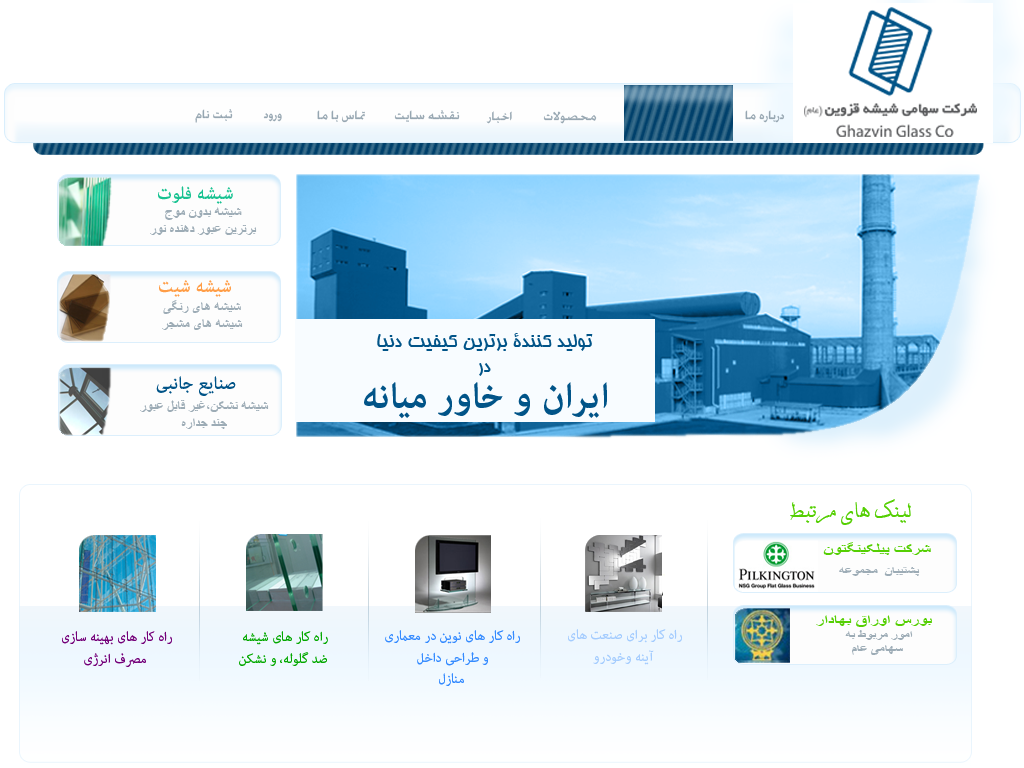
<style>
.page{position:relative;width:1024px;height:768px;background:#ffffff}
.page>*{position:absolute;margin:0}
.t1{font:16px "GillSans-UltraBold";color:#96a6b1}
.t2{font:24px "AdobeArabic-Bold";color:#18c291}
.t3{font:14px "TimesNewRomanPS-BoldMT";color:#9dacb6}
.t4{font:24px "AdobeArabic-Bold";color:#ff9d46}
.t5{font:21px "BHoma";color:#015488}
.t6{font:24px "AdobeArabic-Bold";color:#005387}
.t7{font:51px "AdobeArabic-Bold";color:#015488}
.t8{font:26px "BDavat";color:#55cf03}
.t9{font:14.5px "TimesNewRomanPS-BoldMT";color:#55cf03;scale:1.24 1}
.t10{font:11.3px "TimesNewRomanPS-BoldMT";color:#9dacb6;scale:1.24 1}
.t11{font:18px "AdobeArabic-Regular";color:#358bff}
.t12{font:18px "AdobeArabic-Regular";color:#a4ccfe}
.t13{font:18px "AdobeArabic-Regular";color:#740078}
.t14{font:18px "AdobeArabic-Regular";color:#04a800}
</style>
<div class="page">
<p class="t1" style="left:195px;top:109px;width:38px;height:14px">ثبت نام</p>
<p class="t1" style="left:263px;top:113px;width:19px;height:9px">ورود</p>
<p class="t1" style="left:317px;top:110px;width:48px;height:13px">تماس با ما</p>
<p class="t1" style="left:394px;top:110px;width:66px;height:12px">نقشه سایت</p>
<p class="t1" style="left:486px;top:111px;width:26px;height:13px">اخبار</p>
<p class="t1" style="left:543px;top:111px;width:54px;height:13px">محصولات</p>
<p class="t1" style="left:745px;top:110px;width:40px;height:13px">درباره ما</p>
<p class="t2" style="left:158px;top:186px;width:75px;height:18px">شیشه فلوت</p>
<p class="t3" style="left:150px;top:207px;width:107px;height:28px;text-align:center">شیشه بدون موج<br>برترین عبور دهنده نور</p>
<p class="t4" style="left:159px;top:280px;width:72px;height:17px">شیشه شیت</p>
<p class="t3" style="left:162px;top:300px;width:81px;height:30px;text-align:center">شیشه های رنگی<br>شیشه های مشجر</p>
<p class="t5" style="left:377px;top:333px;width:216px;height:43px;text-align:center">تولید کنندۀ برترین کیفیت دنیا<br>در</p>
<p class="t6" style="left:156px;top:376px;width:80px;height:20px">صنایع جانبی</p>
<p class="t7" style="left:364px;top:382px;width:243px;height:37px">ایران و خاور میانه</p>
<p class="t3" style="left:140px;top:400px;width:129px;height:29px;text-align:center">شیشه نشکن،غیر قابل عبور<br>چند جداره</p>
<p class="t8" style="left:790px;top:499px;width:121px;height:26px">لینک های مرتبط</p>
<p class="t9" style="left:823px;top:542px;width:108px;height:13px">شرکت پیلکینگتون</p>
<p class="t10" style="left:839px;top:567px;width:81px;height:9px">پشتیبان  مجموعه</p>
<p class="t9" style="left:816px;top:615px;width:116px;height:12px">بورس اوراق بهادار</p>
<p class="t11" style="left:385px;top:630px;width:135px;height:56px;text-align:center">راه کار های نوین در معماری <br>و طراحی داخل <br>منازل</p>
<p class="t12" style="left:568px;top:629px;width:114px;height:36px;text-align:center">راه کار برای صنعت های <br>آینه وخودرو</p>
<p class="t10" style="left:845px;top:630px;width:68px;height:25px;text-align:center">امور مربوط به<br> سهامی عام</p>
<p class="t13" style="left:62px;top:631px;width:110px;height:36px;text-align:center">راه کار های بهینه سازی <br>مصرف انرژی</p>
<p class="t14" style="left:239px;top:631px;width:89px;height:35px;text-align:center">راه کار های شیشه<br> ضد گلوله، و نشکن</p>
</div>
